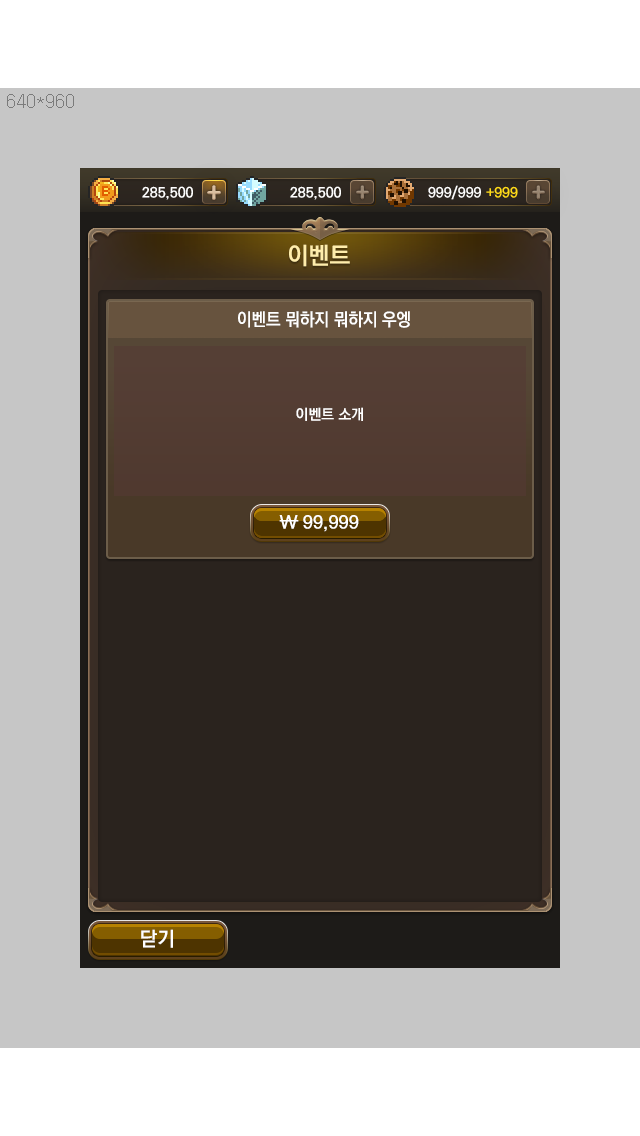
<style>
.page{position:relative;width:640px;height:1136px;background:#c6c6c6}
.page>*{position:absolute;margin:0}
.t1{font:24px "KoPubDotumBold";color:#ffedab}
.t2{font:18px "KoPubDotumBold";color:#ffffff;scale:0.92 1}
.t3{font:14.8px "KoPubDotumBold";color:#ffffff}
.t4{font:18px "KoPubDotumBold";color:#ffffff}
.t5{font:18px "KoPubDotumBold";color:#ffffff;scale:2.12 1}
.t6{font:20px "KoPubDotumBold";color:#ffffff}
</style>
<div class="page">
<p class="t1" style="left:289px;top:244px;width:61px;height:23px">이벤트</p>
<p class="t2" style="left:238px;top:311px;width:172px;height:17px">이벤트 뭐하지 뭐하지 우엥</p>
<p class="t3" style="left:296px;top:407px;width:67px;height:14px">이벤트 소개</p>
<p class="t4" style="left:279px;top:515px;width:19px;height:14px">W</p>
<p class="t5" style="left:279px;top:520px;width:20px;height:2px">-</p>
<p class="t4" style="left:303px;top:515px;width:56px;height:17px">99,999</p>
<p class="t6" style="left:141px;top:929px;width:32px;height:19px">닫기</p>
</div>
